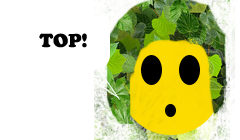
<style>
.page{position:relative;width:240px;height:140px;background:#ffffff}
.page>*{position:absolute;margin:0}
.t1{font:18.5px "CooperBlackStd";color:#010000}
</style>
<div class="page">
<p class="t1" style="left:39px;top:33px;width:48px;height:15px">TOP!</p>
</div>
